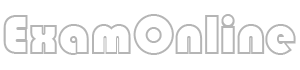
<style>
.page{position:relative;width:300px;height:70px;background:#ffffff}
.page>*{position:absolute;margin:0}
.t1{font:55px "STCaiyun";color:#b5b5b5}
</style>
<div class="page">
<p class="t1" style="left:3px;top:14px;width:293px;height:41px">ExamOnline</p>
</div>
